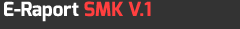
<style>
.page{position:relative;width:240px;height:29px;background:#333333}
.page>*{position:absolute;margin:0}
.t1{font:19.3px "Exo-Bold";color:#ffffff}
.t2{font:19.3px "Exo-Bold";color:#ff3f3f}
</style>
<div class="page">
<p class="t1" style="left:4px;top:1px;width:147px;height:21px">E-Raport <span class="t2">SMK V.1</span></p>
</div>
